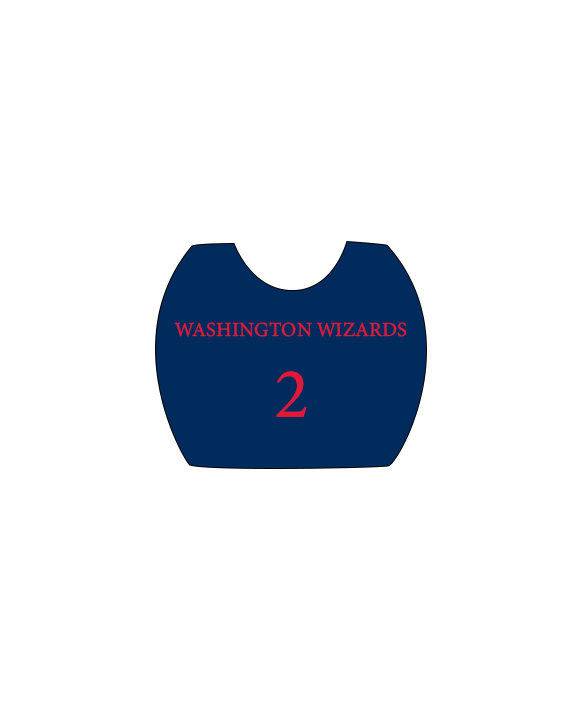
<style>
.page{position:relative;width:576px;height:720px;background:#ffffff}
.page>*{position:absolute;margin:0}
.t1{font:20px "MinionVariableConcept-Roman";color:#e31837}
.t2{font:72px "MinionVariableConcept-Roman";color:#e31837}
</style>
<div class="page">
<p class="t1" style="left:174px;top:322px;width:232px;height:15px">WASHINGTON WIZARDS</p>
<p class="t2" style="left:276px;top:371px;width:31px;height:46px">2</p>
</div>
